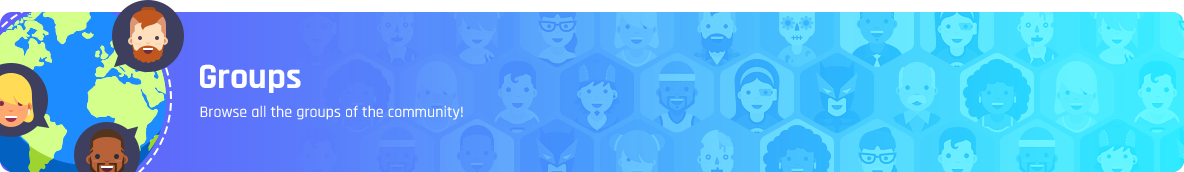
<style>
.page{position:relative;width:1184px;height:172px}
.page>*{position:absolute;margin:0}
.t1{font:36px "Rajdhani-Bold";color:#ffffff}
.t2{font:16px "Rajdhani-Medium";color:#ffffff}
</style>
<div class="page">
<p class="t1" style="left:200px;top:64px;width:101px;height:29px">Groups</p>
<p class="t2" style="left:200px;top:105px;width:263px;height:15px">Browse all the groups of the community!</p>
</div>
